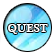
<style>
.page{position:relative;width:56px;height:56px;background:#ffffff}
.page>*{position:absolute;margin:0}
.t1{font:12px "PlantagenetCherokee";color:#ffffff}
</style>
<div class="page">
<p class="t1" style="left:8px;top:24px;width:40px;height:10px">QUEST</p>
</div>
